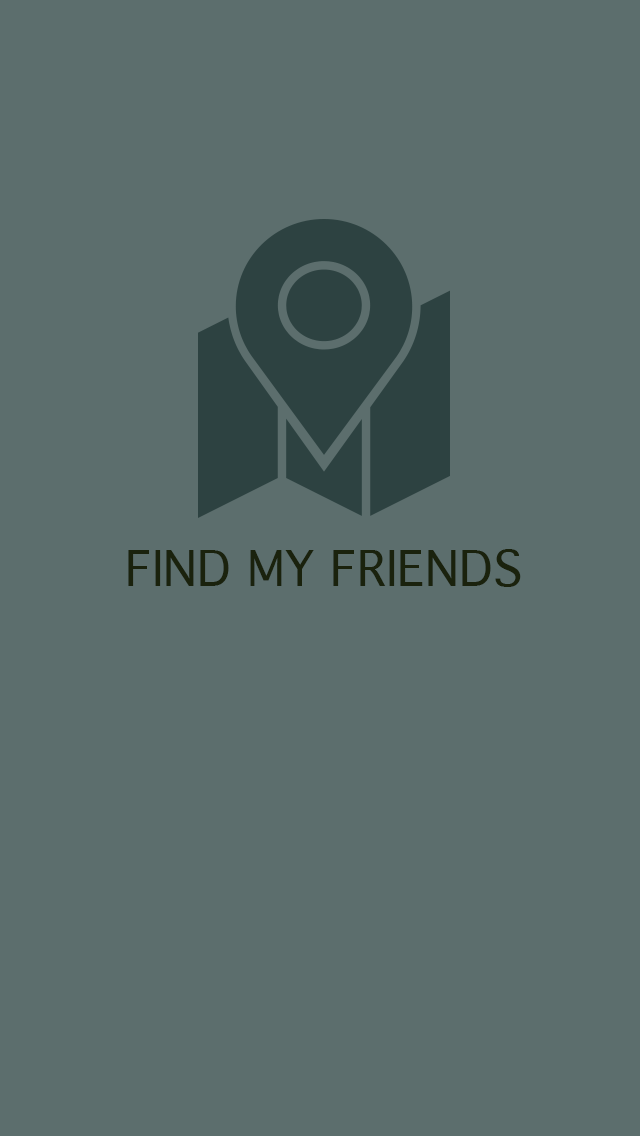
<style>
.page{position:relative;width:640px;height:1136px;background:#5c6e6d}
.page>*{position:absolute;margin:0}
.t1{font:48px "Thonburi";color:#1a220d}
</style>
<div class="page">
<p class="t1" style="left:128px;top:549px;width:393px;height:38px">FIND MY FRIENDS</p>
</div>
